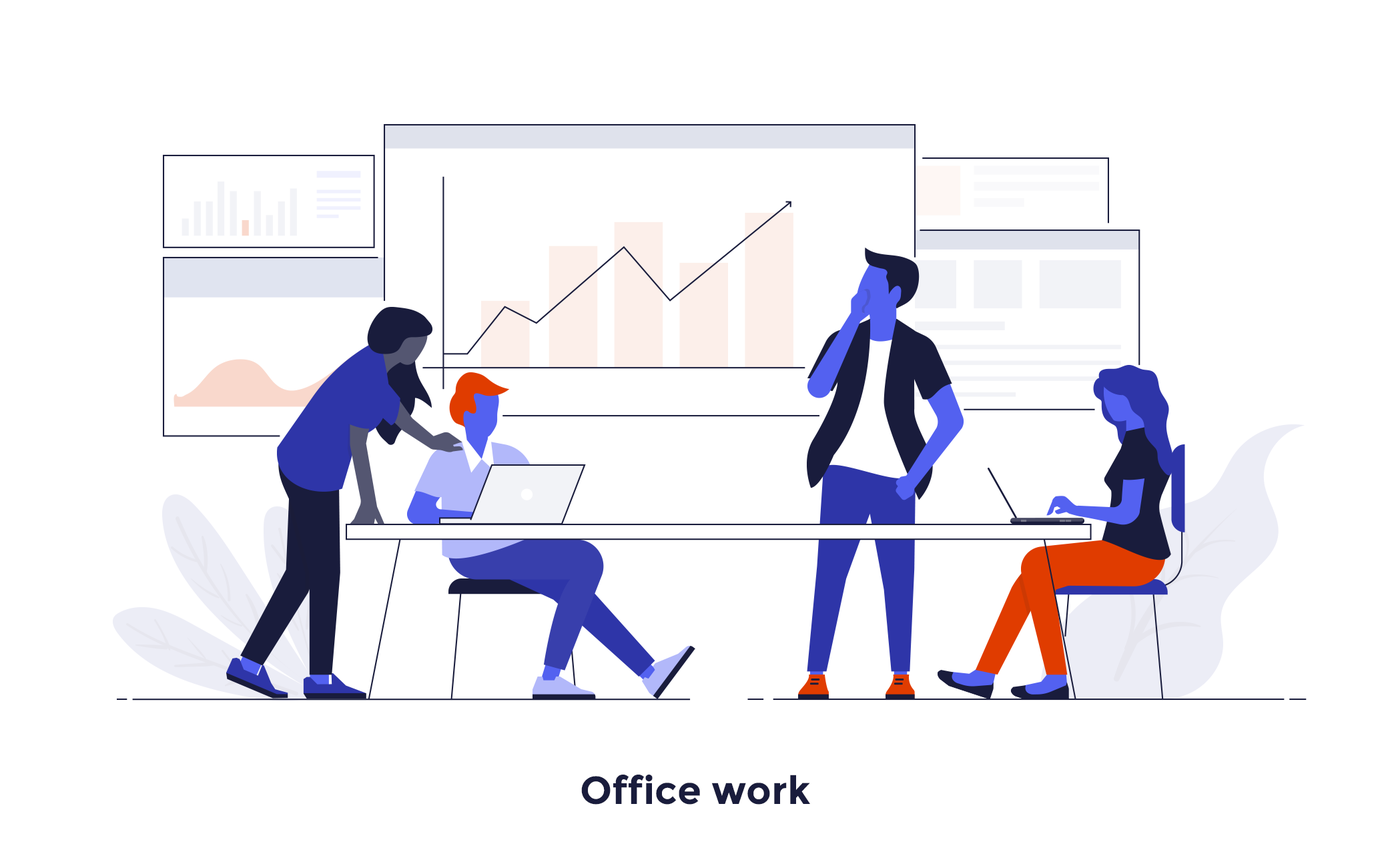
<style>
.page{position:relative;width:1390px;height:858px;background:#ffffff}
.page>*{position:absolute;margin:0}
.t1{font:38.9px "Montserrat-Bold";color:#191c3c}
</style>
<div class="page">
<p class="t1" style="left:581px;top:775px;width:229px;height:30px">Office work</p>
</div>
